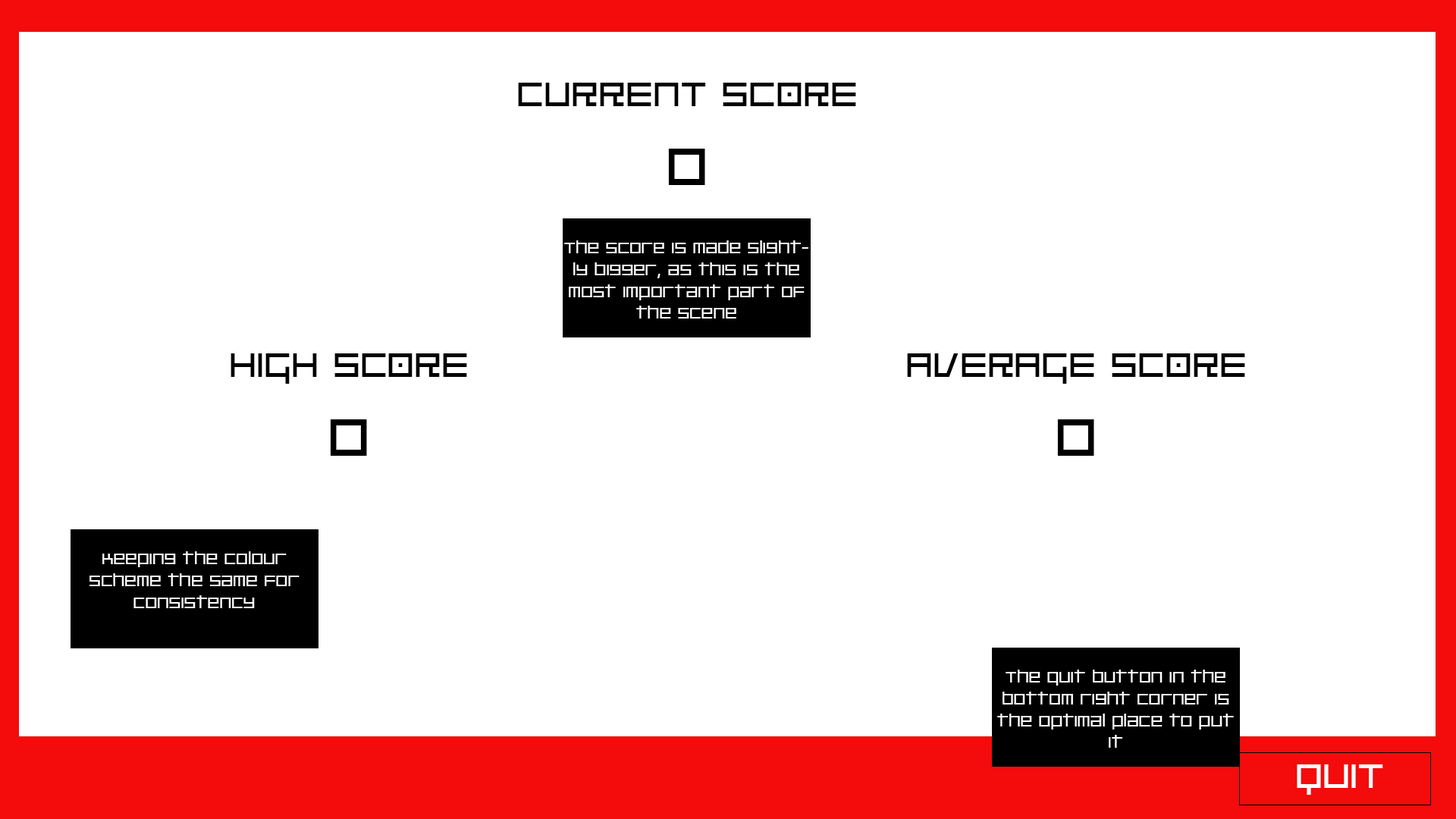
<style>
.page{position:relative;width:1456px;height:819px;background:#ffffff}
.page>*{position:absolute;margin:0}
.t1{font:41.7px "PlatinumBeatBTN";color:#000000}
.t2{font:64.4px "PlatinumBeatBTN";color:#000000}
.t3{font:18.2px "PlatinumBeatBTN";color:#ffffff}
.t4{font:41.7px "PlatinumBeatBTN";color:#ffffff}
</style>
<div class="page">
<p class="t1" style="left:518px;top:83px;width:338px;height:23px">cURRENT sCORE</p>
<p class="t2" style="left:668px;top:149px;width:37px;height:36px">0</p>
<p class="t3" style="left:564px;top:240px;width:244px;height:78px;text-align:center">The score is made slightly bigger, as this is the most important part of the scene</p>
<p class="t1" style="left:231px;top:353px;width:236px;height:31px">HIGH sCORE</p>
<p class="t1" style="left:907px;top:353px;width:338px;height:31px">AVERAGE sCORE</p>
<p class="t2" style="left:330px;top:419px;width:37px;height:37px">0</p>
<p class="t2" style="left:1057px;top:419px;width:37px;height:37px">0</p>
<p class="t3" style="left:89px;top:551px;width:211px;height:57px;text-align:center">Keeping the colour scheme the same for consistency</p>
<p class="t3" style="left:997px;top:670px;width:237px;height:78px;text-align:center">The quit button in the bottom right corner is the optimal place to put it</p>
<p class="t4" style="left:1297px;top:764px;width:86px;height:31px">QUIT</p>
</div>
